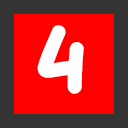
<style>
.page{position:relative;width:128px;height:128px;background:#ff0000}
.page>*{position:absolute;margin:0}
.t1{font:96.2px "Mabook";letter-spacing:0.075em;color:#ffffff}
</style>
<div class="page">
<p class="t1" style="left:37px;top:25px;width:47px;height:69px">4</p>
</div>
